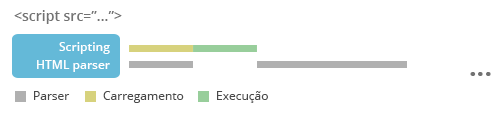
<style>
.page{position:relative;width:500px;height:115px;background:#ffffff}
.page>*{position:absolute;margin:0}
.t1{font:14px "OpenSans-Semibold";color:#727272}
.t2{font:12px "OpenSans-Semibold";color:#ffffff}
.t3{font:27px "OpenSans-Bold";color:#727272}
.t4{font:12px "OpenSans";color:#494949}
</style>
<div class="page">
<p class="t1" style="left:14px;top:10px;width:108px;height:14px">&lt;script src=”...”&gt;</p>
<p class="t2" style="left:59px;top:42px;width:51px;height:12px">Scripting</p>
<p class="t2" style="left:37px;top:60px;width:73px;height:12px">HTML parser</p>
<p class="t3" style="left:470px;top:72px;width:21px;height:4px">...</p>
<p class="t4" style="left:34px;top:91px;width:36px;height:9px">Parser</p>
<p class="t4" style="left:103px;top:91px;width:81px;height:12px">Carregamento</p>
<p class="t4" style="left:217px;top:91px;width:51px;height:12px">Execução</p>
</div>
